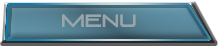
<style>
.page{position:relative;width:218px;height:46px}
.page>*{position:absolute;margin:0}
.t1{font:16.7px "VenusRising-Regular";color:#98a5ab;text-transform:uppercase}
</style>
<div class="page">
<p class="t1" style="left:62px;top:14px;width:74px;height:14px">Menu</p>
</div>
